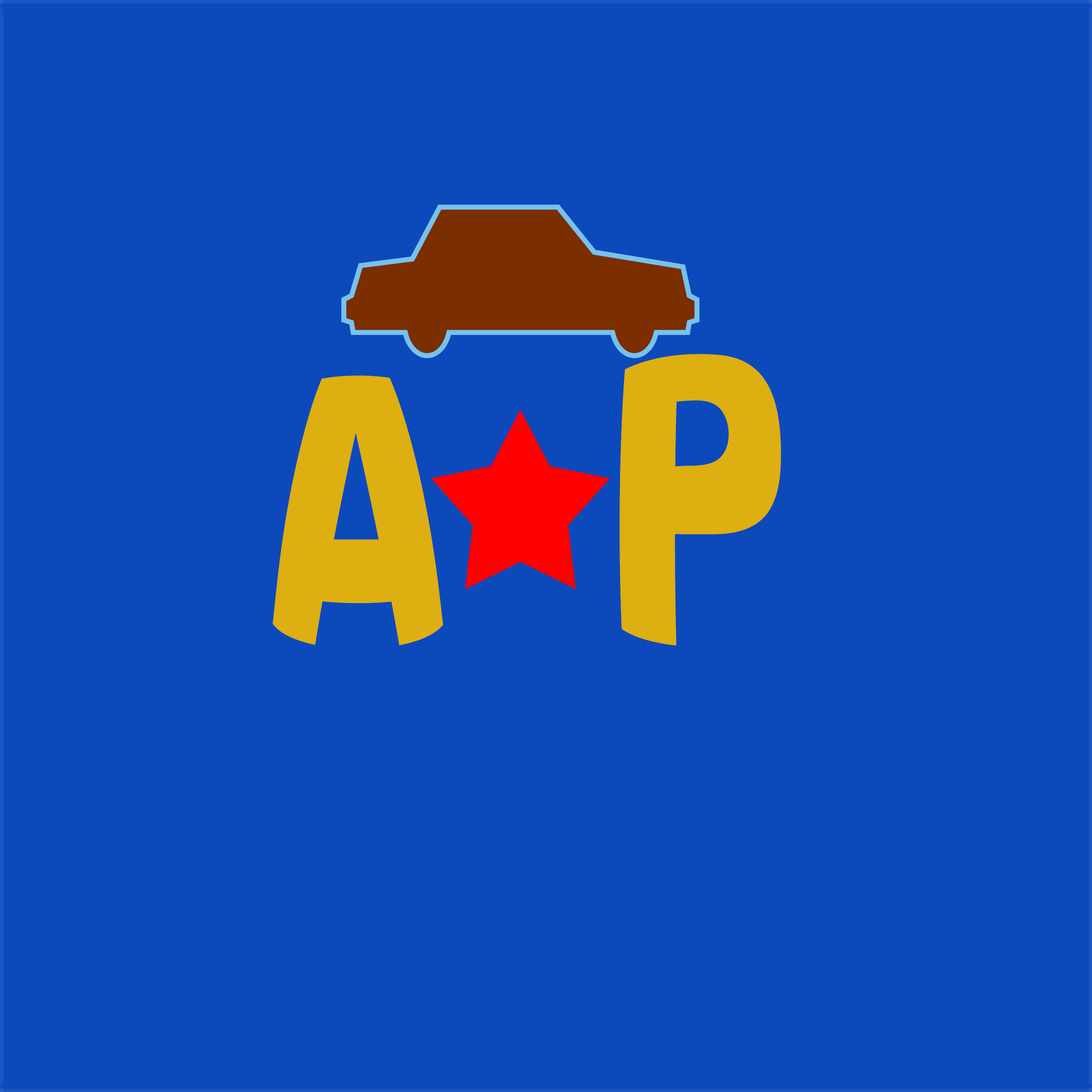
<style>
.page{position:relative;width:1092px;height:1092px;background:#0c4abc}
.page>*{position:absolute;margin:0}
.t1{font:336.2px "Arial-Black";letter-spacing:0.01em;color:#ddaf10;scale:0.71 1}
.t2{font:314.2px "Arial-Black";letter-spacing:0.01em;color:#ddaf10;scale:0.69 1}
</style>
<div class="page">
<p class="t1" style="left:620px;top:354px;width:161px;height:292px">P</p>
<p class="t2" style="left:273px;top:375px;width:170px;height:271px">A</p>
</div>
